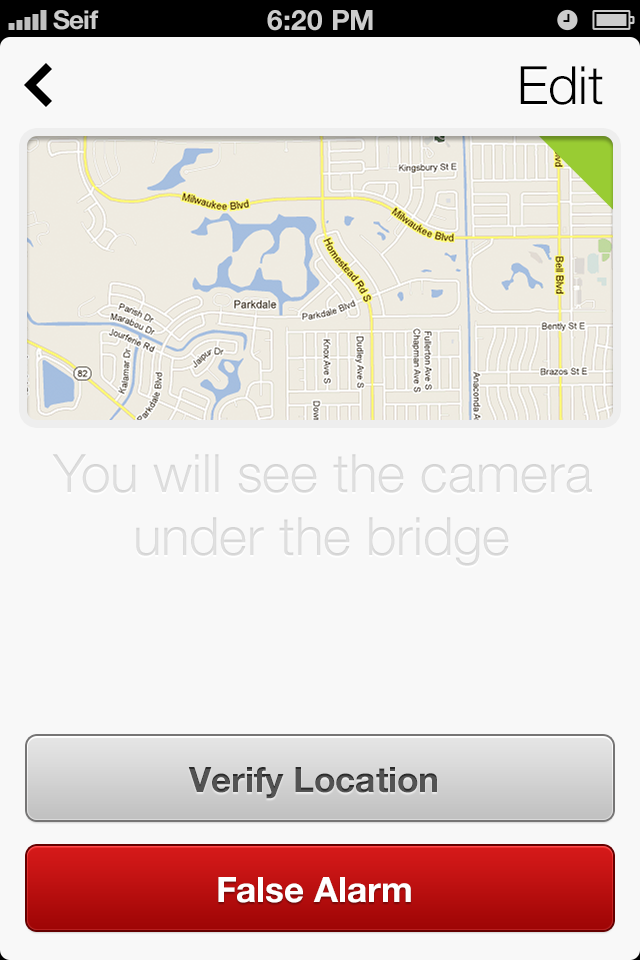
<style>
.page{position:relative;width:640px;height:960px;background:#f8f8f8}
.page>*{position:absolute;margin:0}
.t1{font:53px "HelveticaNeue-Light";color:#000000}
.t2{font:53px "HelveticaNeue-Light";color:#dcdcdc}
.t3{font:35px "HelveticaNeue-Bold";color:#535353}
.t4{font:35px "HelveticaNeue-Bold";color:#ffffff}
</style>
<div class="page">
<p class="t1" style="left:520px;top:66px;width:83px;height:39px">Edit</p>
<p class="t2" style="left:52px;top:454px;width:540px;height:112px;text-align:center">You will see the camera under the bridge</p>
<p class="t3" style="left:188px;top:767px;width:249px;height:32px">Verify Location</p>
<p class="t4" style="left:218px;top:877px;width:193px;height:26px">False Alarm</p>
</div>
